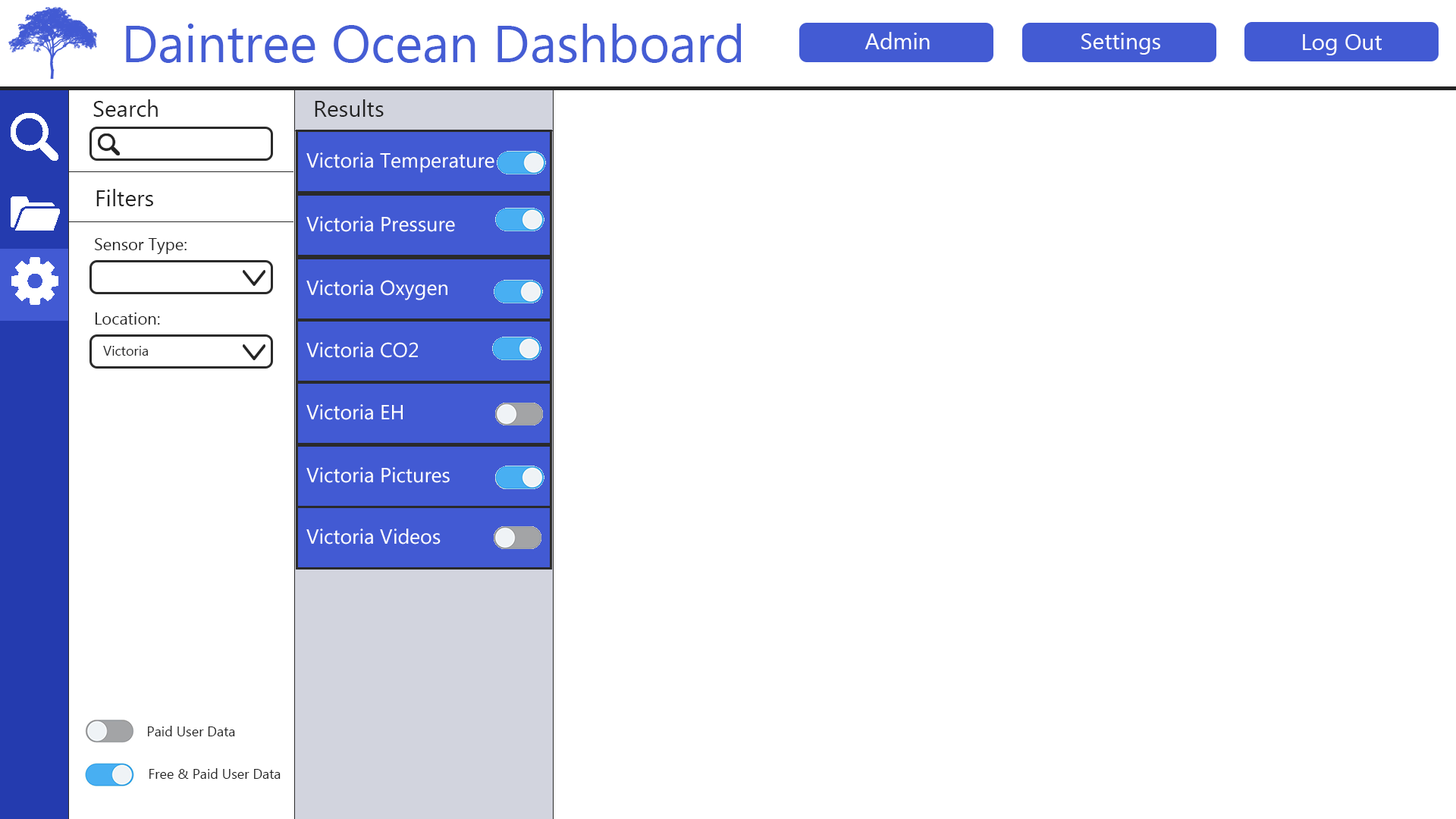
<style>
.page{position:relative;width:1456px;height:819px;background:#ffffff}
.page>*{position:absolute;margin:0}
.t1{font:52.3px "MyanmarText";color:#455dd4}
.t2{font:22.7px "MyanmarText";color:#ffffff}
.t3{font:22.7px "MyanmarText";color:#232323}
.t4{font:20.5px "MyanmarText";color:#ffffff}
.t5{font:16.7px "MyanmarText";color:#232323}
.t6{font:13.6px "MyanmarText";color:#232323}
</style>
<div class="page">
<p class="t1" style="left:126px;top:24px;width:615px;height:39px">Daintree Ocean Dashboard</p>
<p class="t2" style="left:864px;top:32px;width:66px;height:17px">Admin</p>
<p class="t2" style="left:1081px;top:33px;width:79px;height:22px">Settings</p>
<p class="t2" style="left:1303px;top:34px;width:79px;height:21px">Log Out</p>
<p class="t3" style="left:93px;top:99px;width:65px;height:18px">Search</p>
<p class="t3" style="left:315px;top:99px;width:69px;height:18px">Results</p>
<p class="t4" style="left:306px;top:152px;width:188px;height:21px">Victoria Temperature</p>
<p class="t3" style="left:96px;top:189px;width:57px;height:17px">Filters</p>
<p class="t4" style="left:306px;top:216px;width:149px;height:16px">Victoria Pressure</p>
<p class="t5" style="left:95px;top:238px;width:92px;height:16px">Sensor Type:</p>
<p class="t4" style="left:306px;top:280px;width:141px;height:20px">Victoria Oxygen</p>
<p class="t5" style="left:95px;top:312px;width:65px;height:13px">Location:</p>
<p class="t6" style="left:103px;top:346px;width:45px;height:10px">Victoria</p>
<p class="t4" style="left:306px;top:342px;width:112px;height:16px">Victoria CO2</p>
<p class="t4" style="left:306px;top:404px;width:97px;height:16px">Victoria EH</p>
<p class="t4" style="left:306px;top:467px;width:144px;height:16px">Victoria Pictures</p>
<p class="t4" style="left:306px;top:529px;width:135px;height:15px">Victoria Videos</p>
<p class="t6" style="left:148px;top:726px;width:87px;height:10px">Paid User Data</p>
<p class="t6" style="left:149px;top:768px;width:132px;height:11px">Free &amp; Paid User Data</p>
</div>
